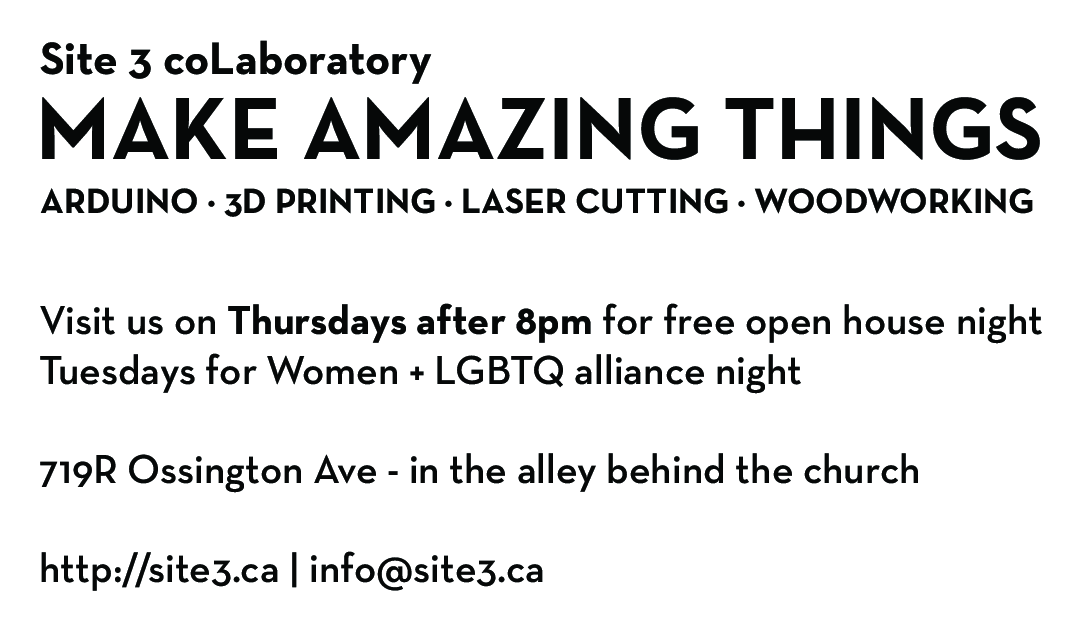
<style>
.page{position:relative;width:1085px;height:635px;background:#ffffff}
.page>*{position:absolute;margin:0}
.t1{font:46.2px "NeutraText-Bold";color:#060808}
.t2{font:89.8px "NeutraText-Bold";color:#060808;text-transform:uppercase}
.t3{font:35.8px "NeutraText-Bold";color:#060808;text-transform:uppercase}
.t4{font:41.3px "NeutraText-Demi";color:#060808}
.t5{font:41.3px "NeutraText-Bold";color:#060808}
</style>
<div class="page">
<p class="t1" style="left:40px;top:40px;width:392px;height:44px">Site 3 coLaboratory</p>
<p class="t2" style="left:42px;top:97px;width:998px;height:63px">Make Amazing Things</p>
<p class="t3" style="left:40px;top:188px;width:993px;height:29px">Arduino · 3d Printing · Laser Cutting · Woodworking</p>
<p class="t4" style="left:40px;top:303px;width:1002px;height:288px">Visit us on <span class="t5">Thursdays after 8pm</span> for free open house night<br>Tuesdays for Women + LGBTQ alliance night<br><br>719R Ossington Ave - in the alley behind the church<br><br>http://site3.ca | info@site3.ca</p>
</div>
